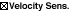
<style>
.page{position:relative;width:80px;height:12px;background:#ffffff}
.page>*{position:absolute;margin:0}
.t1{font:9px "Helvetica-Bold";color:#000000}
</style>
<div class="page">
<p class="t1" style="left:9px;top:2px;width:60px;height:9px">Velocity Sens.</p>
</div>
